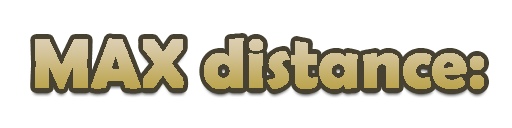
<style>
.page{position:relative;width:512px;height:128px;background:#ffffff}
.page>*{position:absolute;margin:0}
.t1{font:72px "BerlinSansFBDemi-Bold"}
</style>
<div class="page">
<p class="t1" style="left:35px;top:38px;width:449px;height:51px">MAX distance:</p>
</div>
